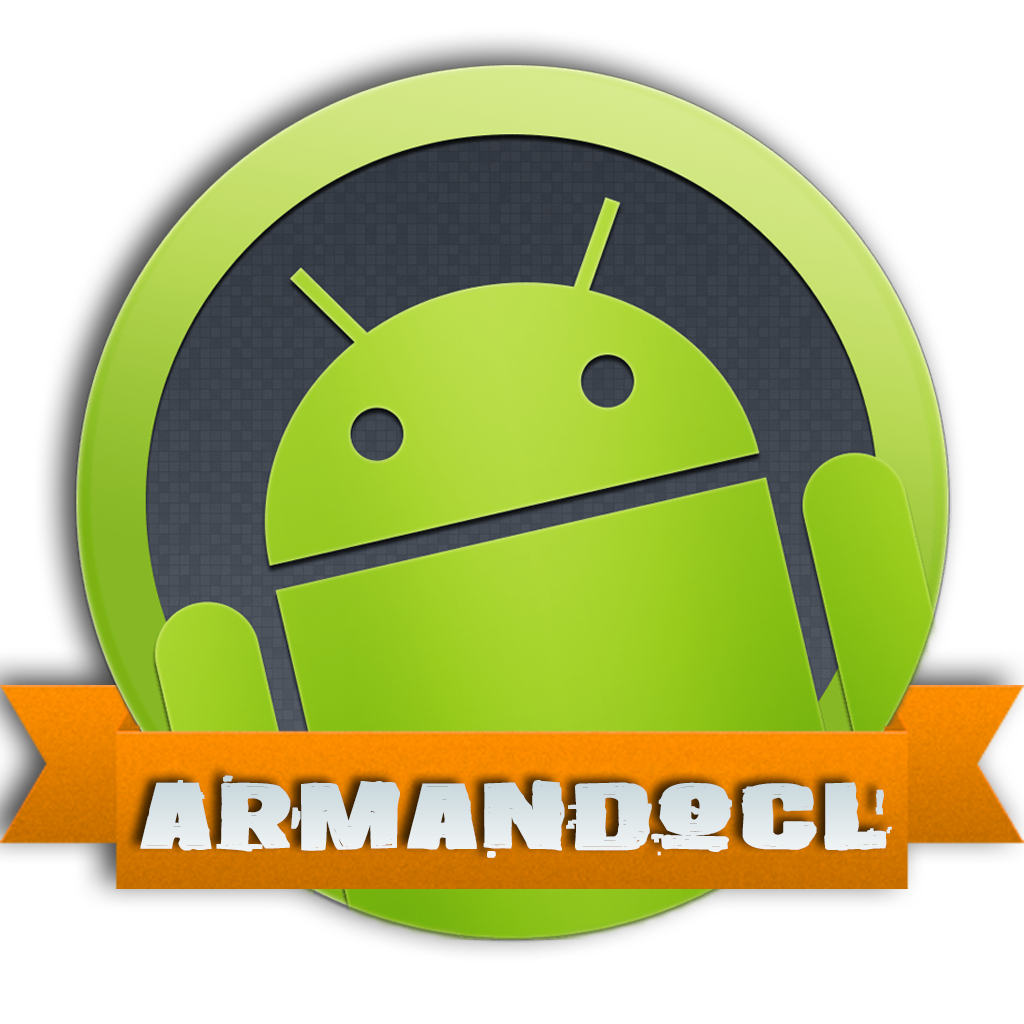
<style>
.page{position:relative;width:1024px;height:1024px;background:#ffffff}
.page>*{position:absolute;margin:0}
.t1{font:90.6px "Krakle!";color:#dde6e9;font-weight:bold}
</style>
<div class="page">
<p class="t1" style="left:140px;top:775px;width:752px;height:83px">ArmandoCl</p>
</div>
